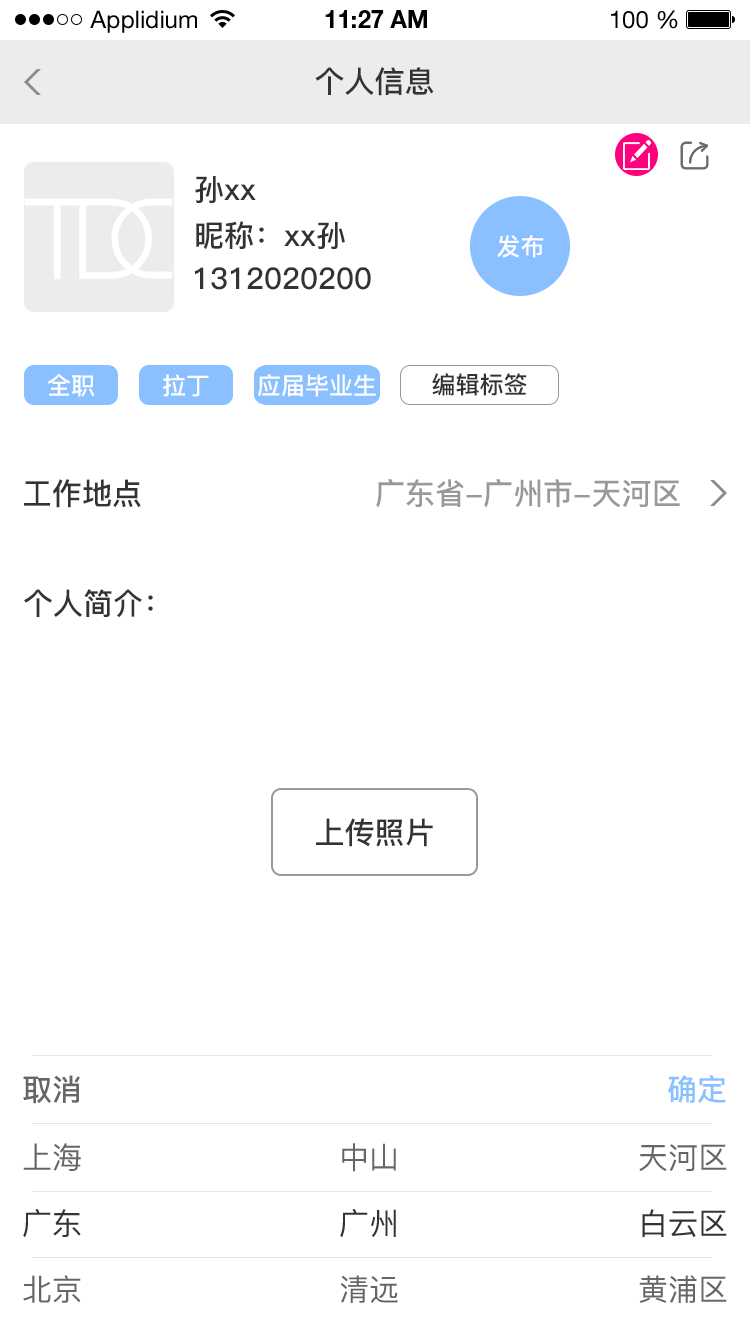
<style>
.page{position:relative;width:750px;height:1334px;background:#ffffff}
.page>*{position:absolute;margin:0}
.t1{font:24px "HelveticaNeueLTStd-Roman";color:#000000}
.t2{font:24px "HelveticaNeueLTStd-Bd";color:#000000}
.t3{font:30px "PingFang-SC-Bold";color:#333333}
.t4{font:24px "PingFang-SC-Bold";color:#ffffff}
.t5{font:24px "PingFang-SC-Bold";color:#333333}
.t6{font:30px "PingFang-SC-Bold";color:#999999}
.t7{font:30px "PingFang-SC-Bold";color:#666666}
.t8{font:30px "PingFang-SC-Bold";color:#8ac0ff}
.t9{font:30px "PingFang-SC-Medium";color:#666666}
.t10{font:30px "PingFang-SC-Medium";color:#333333}
</style>
<div class="page">
<p class="t1" style="left:90px;top:10px;width:107px;height:23px">Applidium</p>
<p class="t2" style="left:325px;top:10px;width:102px;height:18px">11:27 AM</p>
<p class="t1" style="left:611px;top:10px;width:67px;height:19px">100 %</p>
<p class="t3" style="left:315px;top:67px;width:119px;height:29px">个人信息</p>
<p class="t3" style="left:195px;top:176px;width:61px;height:27px">孙xx</p>
<p class="t3" style="left:196px;top:221px;width:149px;height:29px">昵称：xx孙</p>
<p class="t4" style="left:497px;top:235px;width:47px;height:23px">发布</p>
<p class="t3" style="left:195px;top:267px;width:176px;height:23px">1312020200</p>
<p class="t4" style="left:47px;top:374px;width:48px;height:23px">全职</p>
<p class="t4" style="left:163px;top:374px;width:46px;height:23px">拉丁</p>
<p class="t4" style="left:258px;top:374px;width:118px;height:23px">应届毕业生</p>
<p class="t5" style="left:432px;top:373px;width:95px;height:23px">编辑标签</p>
<p class="t3" style="left:24px;top:479px;width:117px;height:29px">工作地点</p>
<p class="t6" style="left:376px;top:479px;width:304px;height:29px">广东省-广州市-天河区</p>
<p class="t3" style="left:24px;top:589px;width:129px;height:28px">个人简介：</p>
<p class="t3" style="left:316px;top:818px;width:117px;height:29px">上传照片</p>
<p class="t7" style="left:23px;top:1075px;width:57px;height:29px">取消</p>
<p class="t8" style="left:668px;top:1075px;width:58px;height:28px">确定</p>
<p class="t9" style="left:23px;top:1143px;width:58px;height:28px">上海</p>
<p class="t9" style="left:342px;top:1143px;width:54px;height:29px">中山</p>
<p class="t9" style="left:639px;top:1144px;width:88px;height:27px">天河区</p>
<p class="t10" style="left:23px;top:1209px;width:58px;height:28px">广东</p>
<p class="t10" style="left:340px;top:1209px;width:56px;height:28px">广州</p>
<p class="t10" style="left:642px;top:1209px;width:85px;height:29px">白云区</p>
<p class="t9" style="left:23px;top:1275px;width:58px;height:28px">北京</p>
<p class="t9" style="left:340px;top:1275px;width:58px;height:28px">清远</p>
<p class="t9" style="left:639px;top:1275px;width:88px;height:28px">黄浦区</p>
</div>
